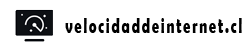
<style>
.page{position:relative;width:250px;height:50px;background:#ffffff}
.page>*{position:absolute;margin:0}
.t1{font:22.3px "BerlinSansFBDemi-Bold";letter-spacing:0.123em;color:#000000;scale:0.64 1}
</style>
<div class="page">
<p class="t1" style="left:65px;top:18px;width:177px;height:15px">velocidaddeinternet.cl</p>
</div>
